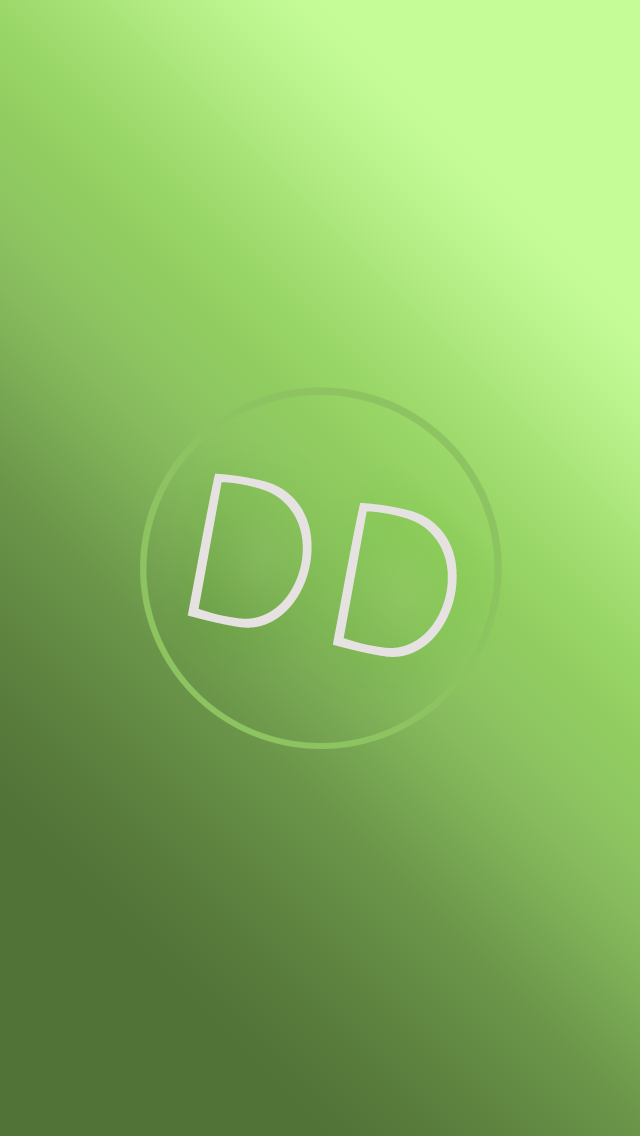
<style>
.page{position:relative;width:640px;height:1136px}
.page>*{position:absolute;margin:0}
.t1{font:200px "cafbrewery";letter-spacing:0.14em;color:#e6e2e2}
</style>
<div class="page">
<p class="t1" style="left:187px;top:473px;width:270px;height:184px;rotate:11deg">DD</p>
</div>
